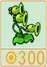
<style>
.page{position:relative;width:47px;height:67px;background:#ccead0}
.page>*{position:absolute;margin:0}
.t1{font:20.2px "SimHei";letter-spacing:0.075em;color:#ff9c00;scale:0.84 1}
.t2{font:20.2px "SimHei";letter-spacing:0.025em;color:#ff9c00;scale:0.84 1}
.t3{font:20.2px "SimHei";letter-spacing:0.2em;color:#ff9c00;scale:0.84 1}
</style>
<div class="page">
<p class="t1" style="left:18px;top:50px;width:27px;height:15px">3<span class="t2">0</span><span class="t3">0</span></p>
</div>
